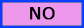
<style>
.page{position:relative;width:84px;height:28px;background:#ee98ed}
.page>*{position:absolute;margin:0}
.t1{font:17px "Verdana";color:#000000;font-weight:bold}
</style>
<div class="page">
<p class="t1" style="left:30px;top:7px;width:25px;height:13px">NO</p>
</div>
